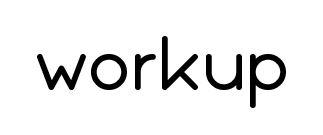
<style>
.page{position:relative;width:323px;height:135px;background:#ffffff}
.page>*{position:absolute;margin:0}
.t1{font:72px "Nokio-Medium";color:#000000}
</style>
<div class="page">
<p class="t1" style="left:37px;top:36px;width:249px;height:72px">workup</p>
</div>
